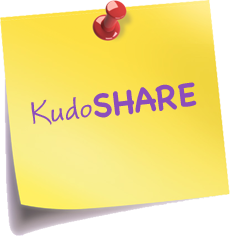
<style>
.page{position:relative;width:230px;height:236px}
.page>*{position:absolute;margin:0}
.t1{font:33.5px "Chalkboard-Bold";color:#8c4dbc}
.t2{font:41.8px "WorstveldSlingBold";color:#8c4dbc}
</style>
<div class="page">
<p class="t1" style="left:31px;top:82px;width:166px;height:43px;rotate:-6deg"><span class="t2">Kudo</span>SHARE</p>
</div>
